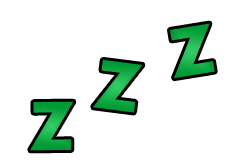
<style>
.page{position:relative;width:234px;height:168px;background:#ffffff}
.page>*{position:absolute;margin:0}
.t1{font:72px "Aharoni-Bold";color:#009933}
</style>
<div class="page">
<p class="t1" style="left:170px;top:23px;width:45px;height:56px;rotate:-9deg">Z</p>
<p class="t1" style="left:93px;top:60px;width:50px;height:53px;rotate:7deg">Z</p>
<p class="t1" style="left:30px;top:101px;width:44px;height:50px;rotate:-1deg">Z</p>
</div>
